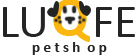
<style>
.page{position:relative;width:137px;height:55px;background:#ffffff}
.page>*{position:absolute;margin:0}
.t1{font:56px "Calibri-Bold";color:#fbb710}
.t2{font:48px "Calibri";color:#242424}
.t3{font:15px "Calibri-Bold";color:#242424}
</style>
<div class="page">
<p class="t1" style="left:53px;top:0px;width:37px;height:42px">Q</p>
<p class="t2" style="left:3px;top:7px;width:42px;height:30px">LU</p>
<p class="t2" style="left:96px;top:7px;width:39px;height:30px">FE</p>
<p class="t3" style="left:32px;top:42px;width:75px;height:13px">p e t s h  o p</p>
</div>
